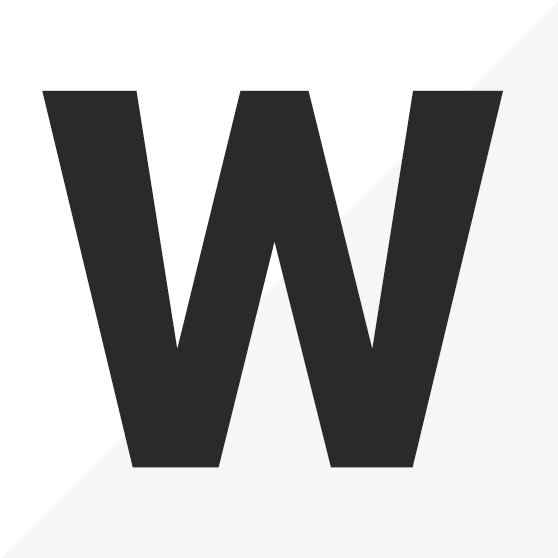
<style>
.page{position:relative;width:558px;height:558px;background:#ffffff}
.page>*{position:absolute;margin:0}
.t1{font:523.1px "Industry-Black";color:#2b2a28;text-transform:uppercase}
</style>
<div class="page">
<p class="t1" style="left:42px;top:90px;width:462px;height:378px">W</p>
</div>
